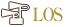
<style>
.page{position:relative;width:69px;height:27px;background:#ffffff}
.page>*{position:absolute;margin:0}
.t1{font:18px "RyuminPro-ExBold";letter-spacing:-0.08em;color:#ae9442;scale:0.9 1}
</style>
<div class="page">
<p class="t1" style="left:33px;top:7px;width:30px;height:15px">LOS</p>
</div>
